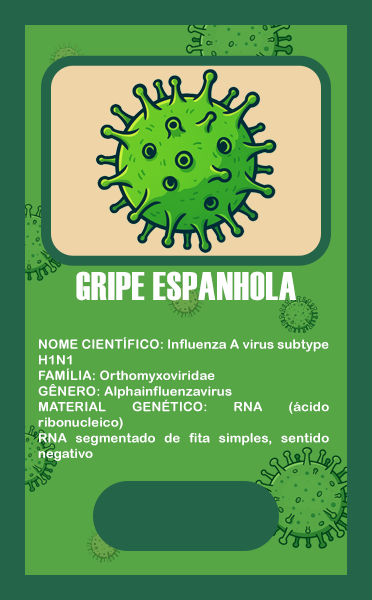
<style>
.page{position:relative;width:372px;height:600px;background:#56a645}
.page>*{position:absolute;margin:0}
.t1{font:40px "Haettenschweiler";letter-spacing:0.015em;color:#ffffff}
.t2{font:13px "ArialRoundedMTBold";letter-spacing:0.015em;color:#ffffff}
</style>
<div class="page">
<p class="t1" style="left:76px;top:271px;width:220px;height:30px">GRIPE ESPANHOLA</p>
<p class="t2" style="left:38px;top:337px;width:291px;height:124px;text-align:justify">NOME CIENTÍFICO: Influenza A virus subtype H1N1<br>FAMÍLIA: Orthomyxoviridae<br>GÊNERO: Alphainfluenzavirus<br>MATERIAL GENÉTICO: RNA (ácido ribonucleico) <br>RNA segmentado de fita simples, sentido negativo</p>
</div>
